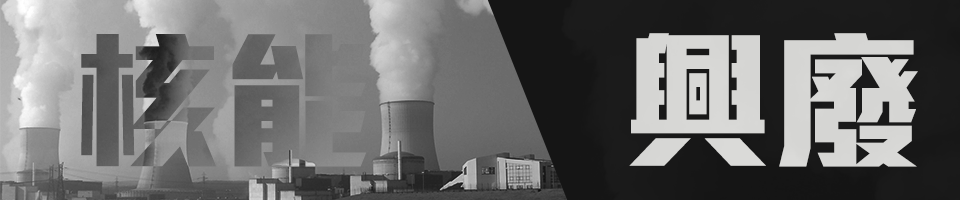
<style>
.page{position:relative;width:960px;height:200px}
.page>*{position:absolute;margin:0}
.t1{font:150px "MStiffHeiHK-UltraBold"}
</style>
<div class="page">
<p class="t1" style="left:81px;top:33px;width:837px;height:134px">核能      興廢</p>
</div>
